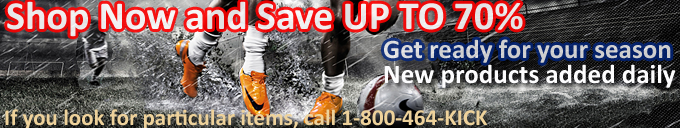
<style>
.page{position:relative;width:680px;height:128px}
.page>*{position:absolute;margin:0}
.t1{font:40px "Calibri-Bold";color:#fcfcfd}
.t2{font:27px "Calibri-Bold";color:#cfcfd0}
.t3{font:27px "Calibri-Bold";color:#fcfcfd}
.t4{font:23px "Calibri-Bold";color:#eed29b}
</style>
<div class="page">
<p class="t1" style="left:7px;top:1px;width:516px;height:36px;opacity:0.89">Shop Now and Save UP TO 70%</p>
<p class="t2" style="left:384px;top:39px;width:287px;height:24px">Get ready for your season</p>
<p class="t3" style="left:384px;top:64px;width:292px;height:24px">New products added daily</p>
<p class="t4" style="left:5px;top:109px;width:482px;height:20px">If you look for particular items, call 1-800-464-KICK</p>
</div>
